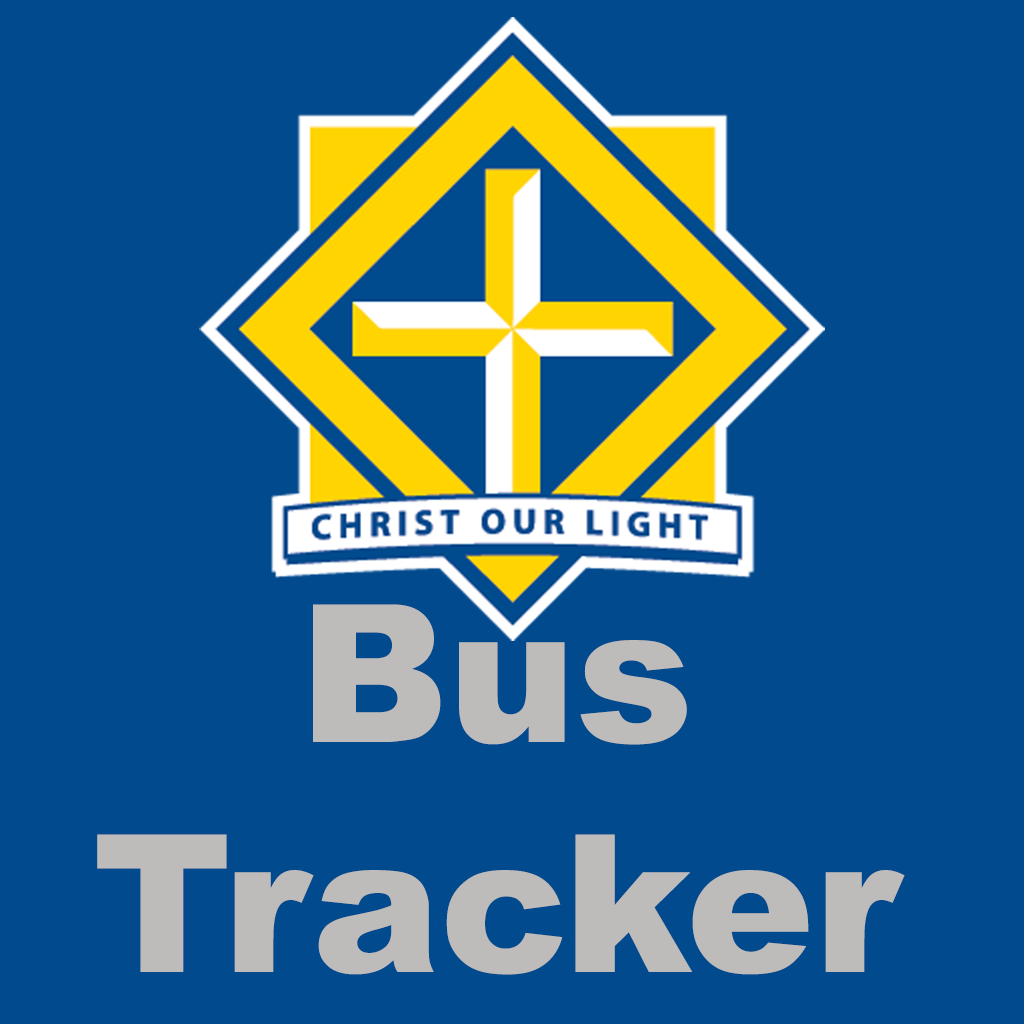
<style>
.page{position:relative;width:1024px;height:1024px;background:#014a8e}
.page>*{position:absolute;margin:0}
.t1{font:192px "Arial-Black";color:#bdbcbb}
</style>
<div class="page">
<p class="t1" style="left:97px;top:604px;width:808px;height:371px;text-align:center">Bus Tracker</p>
</div>
